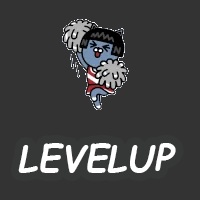
<style>
.page{position:relative;width:200px;height:200px;background:#333333}
.page>*{position:absolute;margin:0}
.t1{font:36px "ComicSansMS-BoldItalic";color:#ffffff}
</style>
<div class="page">
<p class="t1" style="left:18px;top:143px;width:158px;height:30px">LEVELUP</p>
</div>
